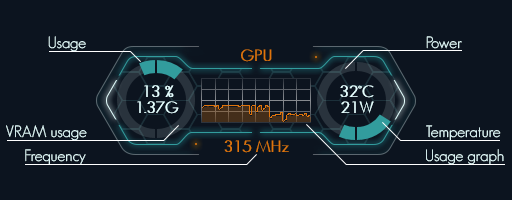
<style>
.page{position:relative;width:512px;height:200px;background:#0c141f}
.page>*{position:absolute;margin:0}
.t1{font:16px "GeosansLight";color:#e6ffff}
</style>
<div class="page">
<p class="t1" style="left:48px;top:36px;width:38px;height:16px">Usage</p>
<p class="t1" style="left:426px;top:36px;width:36px;height:13px">Power</p>
<p class="t1" style="left:6px;top:125px;width:81px;height:16px">VRAM usage</p>
<p class="t1" style="left:426px;top:125px;width:75px;height:16px">Temperature</p>
<p class="t1" style="left:25px;top:149px;width:61px;height:16px">Frequency</p>
<p class="t1" style="left:426px;top:149px;width:78px;height:16px">Usage graph</p>
</div>
